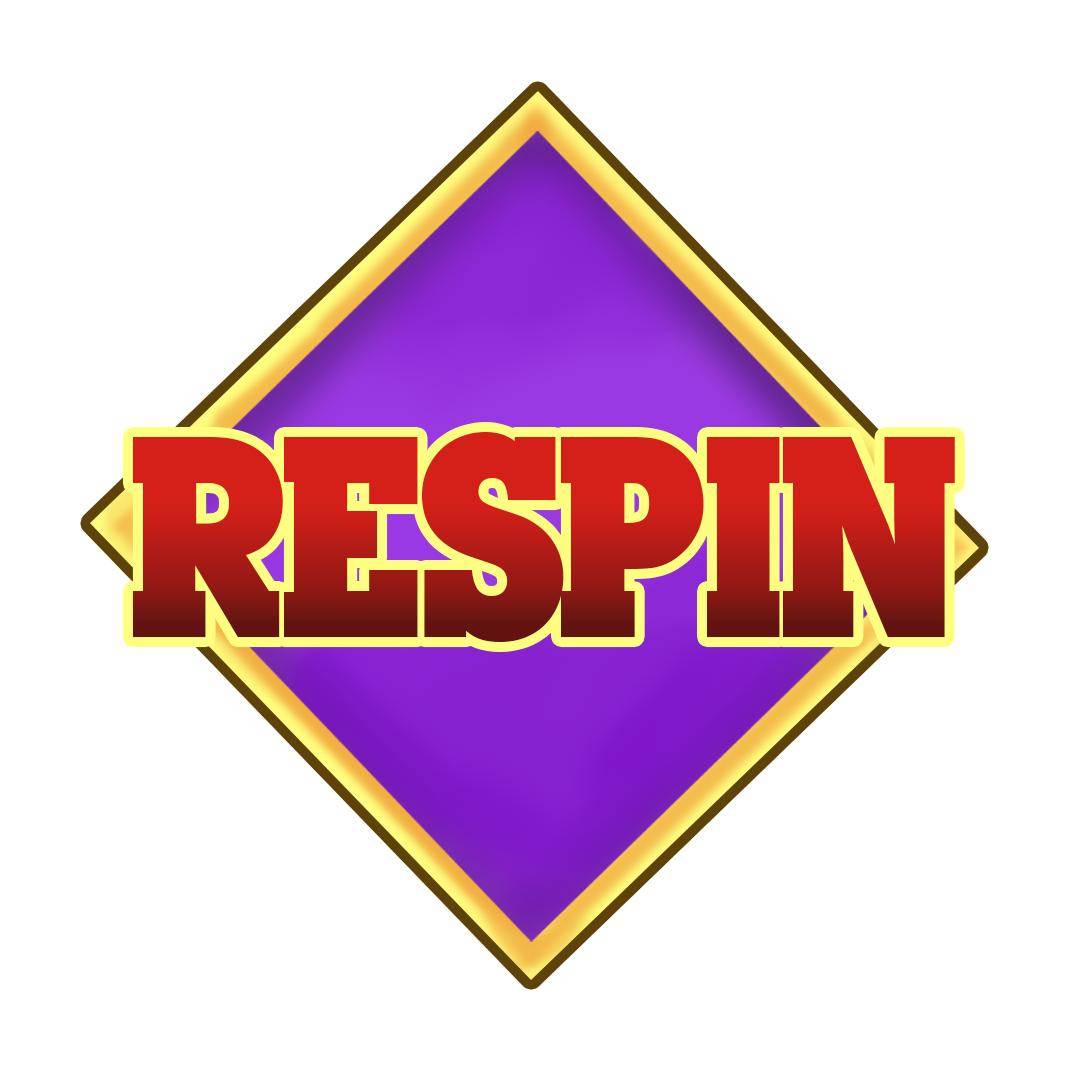
<style>
.page{position:relative;width:1080px;height:1080px;background:#ffffff}
.page>*{position:absolute;margin:0}
.t1{font:300px "Manhandle-Slab";letter-spacing:-0.02em}
</style>
<div class="page">
<p class="t1" style="left:132px;top:432px;width:823px;height:210px">RESPIN</p>
</div>
